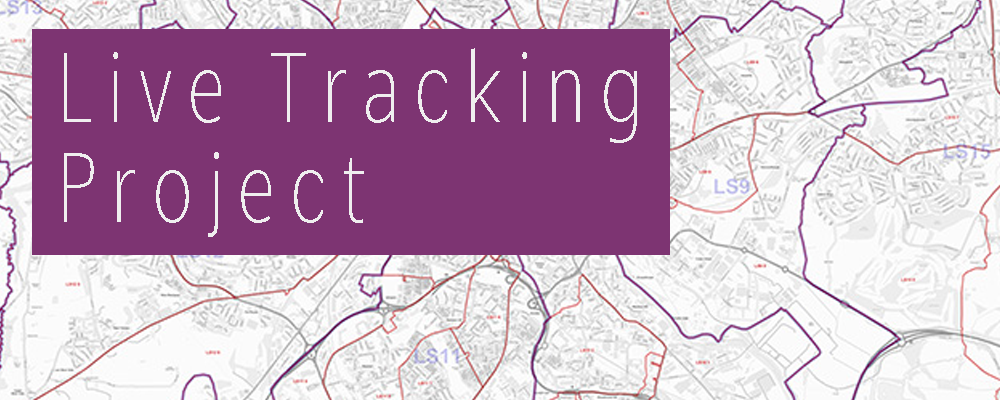
<style>
.page{position:relative;width:1000px;height:400px;background:#7d3472}
.page>*{position:absolute;margin:0}
.t1{font:96.2px/100px "Comme-Thin";letter-spacing:0.2em;color:#efefef;scale:0.73 1}
</style>
<div class="page">
<p class="t1" style="left:64px;top:48px;width:573px;height:189px">Live Tracking<br>Project</p>
</div>
